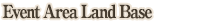
<style>
.page{position:relative;width:204px;height:22px;background:#ffffff}
.page>*{position:absolute;margin:0}
.t1{font:18px "RyuminPro-ExBold";letter-spacing:-0.08em;color:#534738;scale:0.9 1}
</style>
<div class="page">
<p class="t1" style="left:2px;top:4px;width:150px;height:15px">Event Area Land Base</p>
</div>
